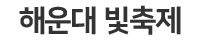
<style>
.page{position:relative;width:200px;height:40px;background:#ffffff}
.page>*{position:absolute;margin:0}
.t1{font:30px "NanumSquare_acEB";color:#333333}
</style>
<div class="page">
<p class="t1" style="left:19px;top:5px;width:162px;height:30px">해운대 빛축제</p>
</div>
